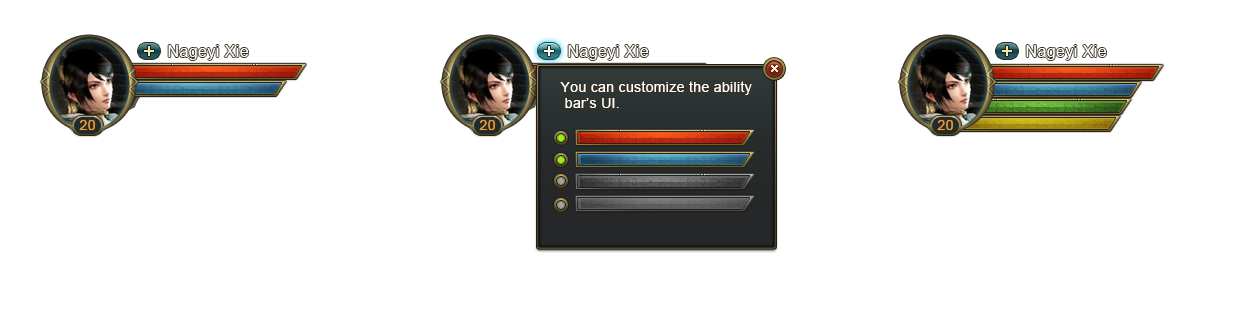
<style>
.page{position:relative;width:1247px;height:317px;background:#ffffff}
.page>*{position:absolute;margin:0}
.t1{font:14px/16px "ArialMT";letter-spacing:0.025em;color:#ffffff}
.t2{font:14px "ArialMT";letter-spacing:0.025em;color:#f29c40}
</style>
<div class="page">
<p class="t1" style="left:560px;top:81px;width:192px;height:27px">You can customize the ability<br> bar’s UI.</p>
<p class="t2" style="left:79px;top:120px;width:16px;height:10px">20</p>
<p class="t2" style="left:479px;top:120px;width:16px;height:10px">20</p>
<p class="t2" style="left:937px;top:120px;width:16px;height:10px">20</p>
</div>
